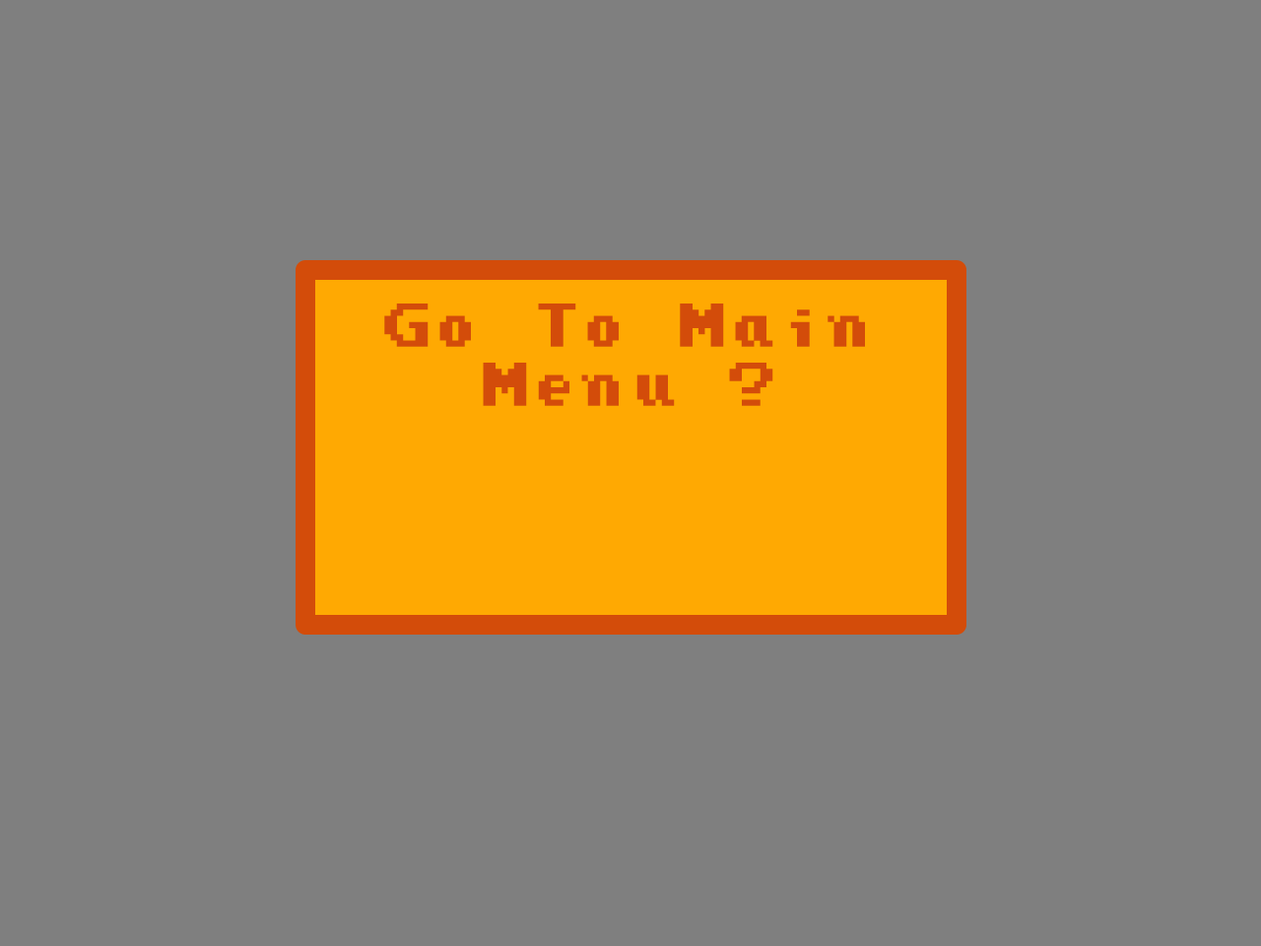
<style>
.page{position:relative;width:1261px;height:946px;background:#7f7f7f}
.page>*{position:absolute;margin:0}
.t1{font:49.3px "PressStartReg";color:#d34c0a}
</style>
<div class="page">
<p class="t1" style="left:384px;top:303px;width:481px;height:103px;text-align:center">Go To Main Menu ?</p>
</div>
